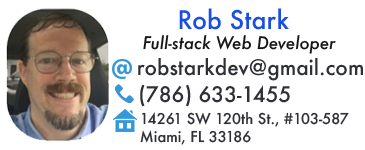
<style>
.page{position:relative;width:365px;height:150px;background:#ffffff}
.page>*{position:absolute;margin:0}
.t1{font:25px "Futura-Medium";color:#1a4ee2}
.t2{font:16.7px "Futura-MediumItalic";color:#161516}
.t3{font:20.8px "Futura-Medium";color:#2e3036}
.t4{font:14.6px "Futura-Medium";color:#2e3036}
</style>
<div class="page">
<p class="t1" style="left:179px;top:8px;width:110px;height:22px">Rob Stark</p>
<p class="t2" style="left:143px;top:35px;width:193px;height:19px">Full-stack Web Developer</p>
<p class="t3" style="left:138px;top:58px;width:225px;height:23px">robstarkdev@gmail.com</p>
<p class="t3" style="left:140px;top:84px;width:150px;height:23px">(786) 633-1455</p>
<p class="t4" style="left:140px;top:112px;width:209px;height:33px">14261 SW 120th St., #103-587<br>Miami, FL 33186</p>
</div>
